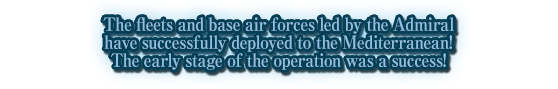
<style>
.page{position:relative;width:558px;height:89px;background:#ffffff}
.page>*{position:absolute;margin:0}
.t1{font:18px/18px "RyuminPro-ExBold";letter-spacing:-0.04em;color:#93bee0;scale:0.9 1}
</style>
<div class="page">
<p class="t1" style="left:103px;top:17px;width:351px;height:53px;text-align:center">The fleets and base air forces led by the Admiral<br>have successfully deployed to the Mediterranean!<br>The early stage of the operation was a success!</p>
</div>
